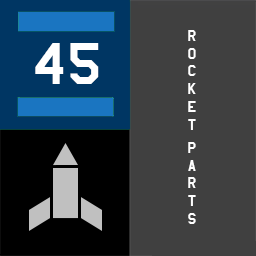
<style>
.page{position:relative;width:256px;height:256px;background:#404040}
.page>*{position:absolute;margin:0}
.t1{font:17.8px "AmarilloUSAF";color:#ffffff}
.t2{font:69.1px "AmarilloUSAF";color:#ffffff}
</style>
<div class="page">
<p class="t1" style="left:188px;top:30px;width:8px;height:194px">Rocket Parts</p>
<p class="t2" style="left:35px;top:43px;width:64px;height:41px">45</p>
</div>
